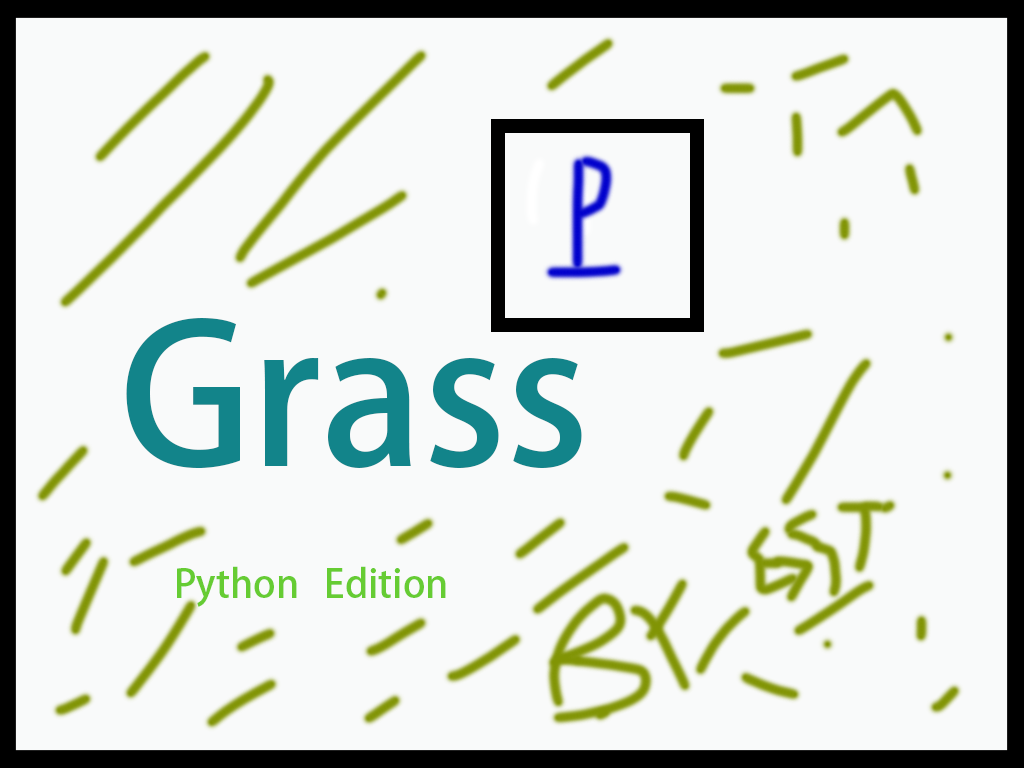
<style>
.page{position:relative;width:1024px;height:768px;background:#f9fafa}
.page>*{position:absolute;margin:0}
.t1{font:191.7px "AdobeHeitiStd-Regular";color:#12848a}
.t2{font:38.3px "AdobeHeitiStd-Regular";color:#66cc33}
</style>
<div class="page">
<p class="t1" style="left:126px;top:318px;width:456px;height:151px">Grass</p>
<p class="t2" style="left:177px;top:566px;width:269px;height:41px">Python   Edition</p>
</div>
